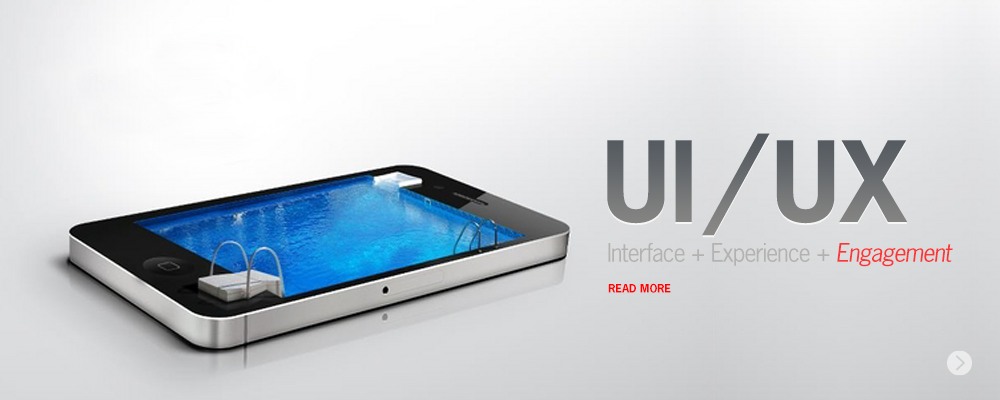
<style>
.page{position:relative;width:1000px;height:400px}
.page>*{position:absolute;margin:0}
.t1{font:104.7px "NewsGothic-Bold";color:#616161}
.t2{font:104.7px "NewsGothic-Bold";letter-spacing:0.1em;color:#616161}
.t3{font:104.7px "NewsGothic-Bold";letter-spacing:0.075em;color:#616161}
.t4{font:24px "NewsGothic";letter-spacing:-0.05em;color:#b3b2b0}
.t5{font:24px "NewsGothic-Oblique";letter-spacing:-0.05em;color:#fa3636}
.t6{font:11px "NewsGothic-Bold";color:#ff0202}
</style>
<div class="page">
<p class="t1" style="left:607px;top:133px;width:300px;height:103px">U<span class="t2">I</span><span class="t3">/</span>UX</p>
<p class="t4" style="left:608px;top:242px;width:345px;height:25px">Interface + Experience + <span class="t5">Engagement</span></p>
<p class="t6" style="left:608px;top:283px;width:63px;height:10px">READ MORE</p>
</div>
